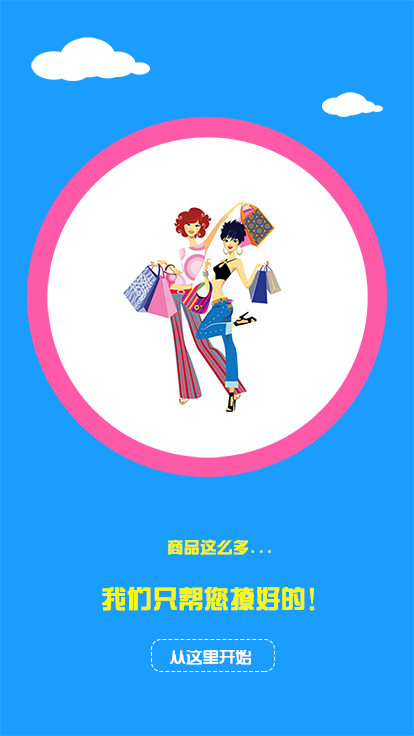
<style>
.page{position:relative;width:414px;height:736px;background:#1b9dff}
.page>*{position:absolute;margin:0}
.t1{font:16px "ç»å¸ç»¼èºä½ç®-regular";color:#fefb05;font-weight:bold}
.t2{font:25px "ç»å¸ç»¼èºä½ç®-regular";color:#fefb05;font-weight:bold}
.t3{font:16px "TRENDS";color:#ffffff;font-weight:bold}
</style>
<div class="page">
<p class="t1" style="left:168px;top:539px;width:103px;height:16px">商品这么多...</p>
<p class="t2" style="left:102px;top:587px;width:213px;height:24px">我们只帮您撩好的！</p>
<p class="t3" style="left:170px;top:650px;width:82px;height:15px">从这里开始</p>
</div>
